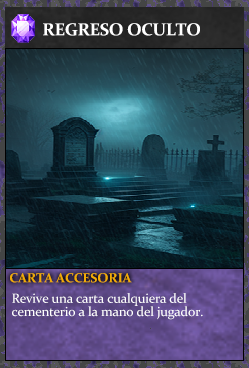
<style>
.page{position:relative;width:249px;height:368px}
.page>*{position:absolute;margin:0}
.t1{font:17.3px "Constantia-Bold";letter-spacing:-0.02em;color:#ffffff}
.t2{font:13.3px "Constantia-Bold";letter-spacing:-0.02em;color:#f2ac05}
.t3{font:13.3px/13.3px "Constantia";letter-spacing:-0.02em;color:#ffffff}
</style>
<div class="page">
<p class="t1" style="left:43px;top:23px;width:157px;height:13px">REGRESO OCULTO</p>
<p class="t2" style="left:10px;top:273px;width:122px;height:10px">CARTA ACCESORIA</p>
<p class="t3" style="left:12px;top:293px;width:191px;height:27px">Revive una carta cualquiera del<br>cementerio a la mano del jugador.</p>
</div>
